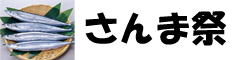
<style>
.page{position:relative;width:234px;height:60px;background:#ffffff}
.page>*{position:absolute;margin:0}
.t1{font:36px "HGSoeiKakupoptai";color:#000000}
</style>
<div class="page">
<p class="t1" style="left:85px;top:11px;width:142px;height:35px">さんま祭り</p>
</div>
